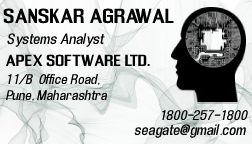
<style>
.page{position:relative;width:252px;height:144px}
.page>*{position:absolute;margin:0}
.t1{font:19px "EnigmaticBold";color:#000000}
.t2{font:14px "EnigmaticItalic";color:#000000}
.t3{font:15px "EnigmaticBold";color:#000000}
.t4{font:13px "EnigmaticItalic";color:#000000}
</style>
<div class="page">
<p class="t1" style="left:3px;top:8px;width:171px;height:16px">SANSKAR AGRAWAL</p>
<p class="t2" style="left:6px;top:33px;width:99px;height:14px">Systems Analyst</p>
<p class="t3" style="left:5px;top:54px;width:145px;height:13px">APEX SOFTWARE LTD.</p>
<p class="t4" style="left:5px;top:73px;width:103px;height:29px">11/B  Office Road,<br>Pune, Maharashtra</p>
<p class="t4" style="left:162px;top:110px;width:87px;height:11px">1800-257-1800</p>
<p class="t2" style="left:134px;top:124px;width:113px;height:14px">seagate@gmail.com</p>
</div>
